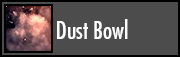
<style>
.page{position:relative;width:180px;height:57px;background:#4c4c4c}
.page>*{position:absolute;margin:0}
.t1{font:24px "FuturaCondensed";color:#ffffff}
</style>
<div class="page">
<p class="t1" style="left:57px;top:19px;width:71px;height:20px">Dust Bowl</p>
</div>
